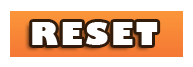
<style>
.page{position:relative;width:193px;height:67px;background:#ffffff}
.page>*{position:absolute;margin:0}
.t1{font:30.5px "GillSans-UltraBold";letter-spacing:0.1em;color:#ffffff}
</style>
<div class="page">
<p class="t1" style="left:32px;top:22px;width:126px;height:23px">RESET</p>
</div>
